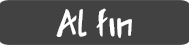
<style>
.page{position:relative;width:189px;height:45px;background:#424242}
.page>*{position:absolute;margin:0}
.t1{font:34.9px "AcadianRunes-Regular";color:#ffffff}
</style>
<div class="page">
<p class="t1" style="left:56px;top:8px;width:76px;height:30px">Al fin</p>
</div>
